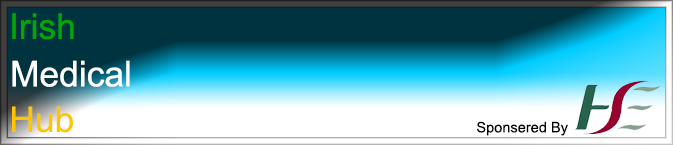
<style>
.page{position:relative;width:673px;height:145px;background:#003340}
.page>*{position:absolute;margin:0}
.t1{font:35.4px "ArialMT";color:#06a506}
.t2{font:35.4px "ArialMT";color:#fefefe}
.t3{font:35.4px "ArialMT";color:#ffc600}
.t4{font:14.6px "ArialMT";color:#000000}
</style>
<div class="page">
<p class="t1" style="left:12px;top:13px;width:62px;height:27px">Irish</p>
<p class="t2" style="left:12px;top:60px;width:118px;height:27px">Medical</p>
<p class="t3" style="left:12px;top:106px;width:61px;height:27px">Hub</p>
<p class="t4" style="left:477px;top:121px;width:91px;height:15px">Sponsered By</p>
</div>
